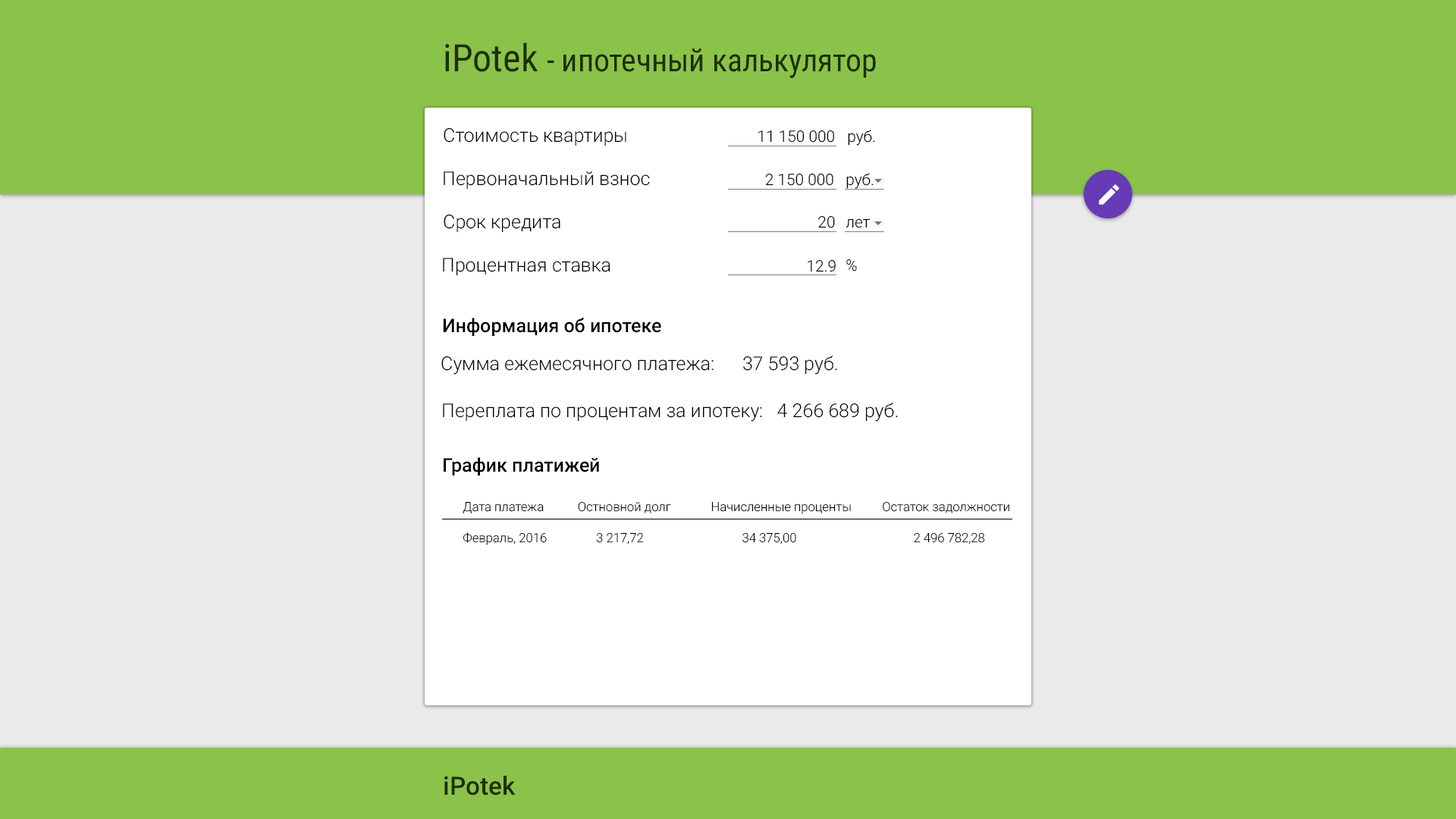
<style>
.page{position:relative;width:1456px;height:819px;background:#eaeaea}
.page>*{position:absolute;margin:0}
.t1{font:31.6px "RobotoCondensed-Regular";color:#1e2f0c}
.t2{font:37.9px "RobotoCondensed-Regular";color:#1e2f0c}
.t3{font:19px "Roboto-Light";color:#000000}
.t4{font:15.8px "Roboto-Light";color:#000000}
.t5{font:19px "Roboto-Medium";color:#000000}
.t6{font:12.6px "Roboto-Light";color:#000000}
.t7{font:25.3px "Roboto-Medium";color:#1e2f0c}
</style>
<div class="page">
<p class="t1" style="left:445px;top:42px;width:431px;height:36px"><span class="t2">iPotek </span>- ипотечный калькулятор</p>
<p class="t3" style="left:444px;top:127px;width:182px;height:19px">Стоимость квартиры</p>
<p class="t4" style="left:758px;top:130px;width:76px;height:13px">11 150 000</p>
<p class="t4" style="left:848px;top:130px;width:27px;height:16px">руб.</p>
<p class="t3" style="left:444px;top:171px;width:206px;height:18px">Первоначальный взнос</p>
<p class="t4" style="left:765px;top:173px;width:68px;height:13px">2 150 000</p>
<p class="t4" style="left:846px;top:173px;width:28px;height:16px">руб.</p>
<p class="t3" style="left:444px;top:214px;width:116px;height:19px">Срок кредита</p>
<p class="t4" style="left:818px;top:215px;width:17px;height:13px">20</p>
<p class="t4" style="left:846px;top:218px;width:25px;height:10px">лет</p>
<p class="t3" style="left:443px;top:258px;width:167px;height:18px">Процентная ставка</p>
<p class="t4" style="left:808px;top:259px;width:28px;height:13px">12.9</p>
<p class="t4" style="left:846px;top:259px;width:11px;height:12px">%</p>
<p class="t5" style="left:443px;top:318px;width:218px;height:18px">Информация об ипотеке</p>
<p class="t3" style="left:441px;top:356px;width:396px;height:19px">Сумма ежемесячного платежа:      37 593 руб.</p>
<p class="t3" style="left:443px;top:402px;width:455px;height:20px">Переплата по процентам за ипотеку:   4 266 689 руб.</p>
<p class="t5" style="left:444px;top:457px;width:155px;height:18px">График платижей</p>
<p class="t6" style="left:463px;top:501px;width:546px;height:13px">Дата платежа           Остновной долг             Начисленные проценты          Остаток задолжности</p>
<p class="t6" style="left:463px;top:532px;width:522px;height:13px">Февраль, 2016                3 217,72                                34 375,00                                      2 496 782,28</p>
<p class="t7" style="left:444px;top:776px;width:72px;height:19px">iPotek</p>
</div>
